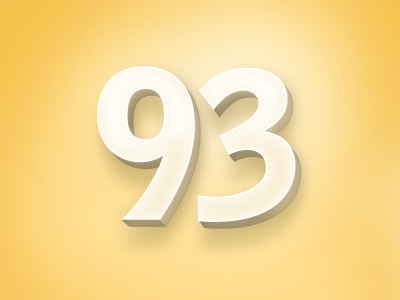
<style>
.page{position:relative;width:400px;height:300px}
.page>*{position:absolute;margin:0}
.t1{font:200px "BellGothicStd-Black";letter-spacing:-0.04em;color:#fdf8ec}
</style>
<div class="page">
<p class="t1" style="left:97px;top:66px;width:199px;height:156px">93</p>
</div>
